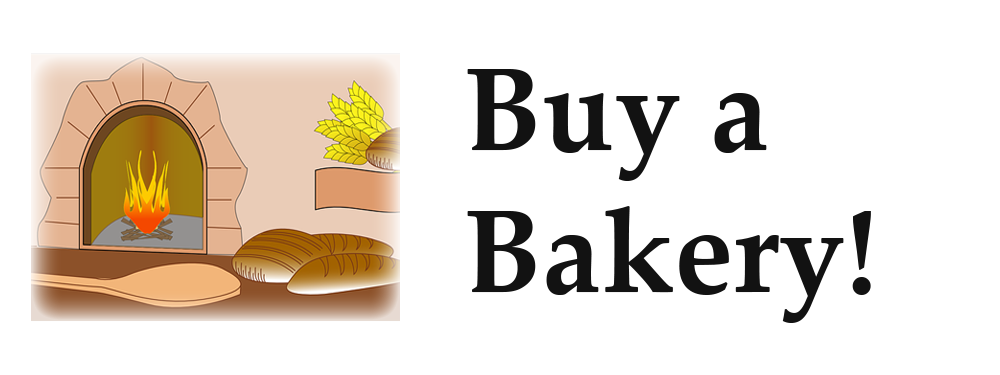
<style>
.page{position:relative;width:1000px;height:375px;background:#ffffff}
.page>*{position:absolute;margin:0}
.t1{font:118.3px "PalatinoLinotype-Bold";color:#121212}
</style>
<div class="page">
<p class="t1" style="left:467px;top:69px;width:404px;height:254px">Buy a <br>Bakery!</p>
</div>
